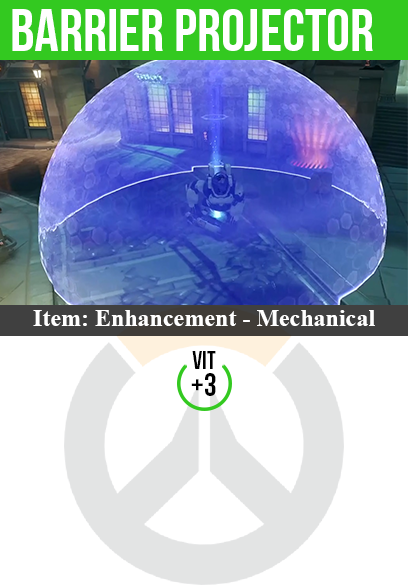
<style>
.page{position:relative;width:408px;height:585px;background:#ffffff}
.page>*{position:absolute;margin:0}
.t1{font:60px "BebasNeue";color:#ffffff}
.t2{font:24px "TimesNewRomanPS-BoldMT";color:#ffffff}
.t3{font:25px "BebasNeue";color:#000000}
.t4{font:32px "BebasNeue";color:#000000}
</style>
<div class="page">
<p class="t1" style="left:12px;top:9px;width:361px;height:42px">barrier projector</p>
<p class="t2" style="left:33px;top:310px;width:342px;height:16px">Item: Enhancement - Mechanical</p>
<p class="t3" style="left:192px;top:351px;width:24px;height:18px">vit</p>
<p class="t4" style="left:191px;top:373px;width:25px;height:23px">+3</p>
</div>
